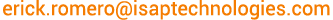
<style>
.page{position:relative;width:333px;height:20px;background:#ffffff}
.page>*{position:absolute;margin:0}
.t1{font:20px "Roboto-Regular";color:#f57c00}
</style>
<div class="page">
<p class="t1" style="left:3px;top:0px;width:327px;height:20px">erick.romero@isaptechnologies.com</p>
</div>
